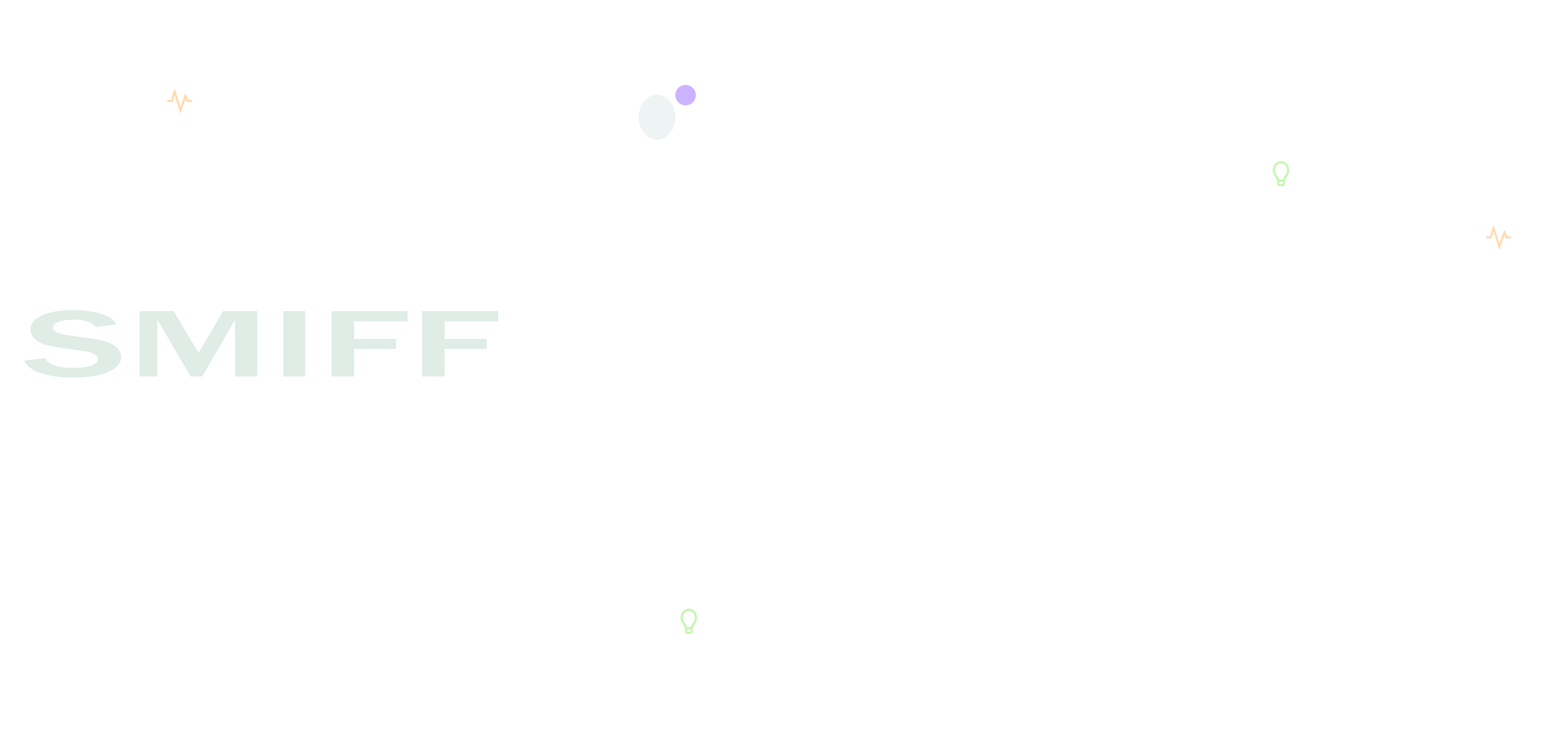
<style>
.page{position:relative;width:1568px;height:735px;background:#ffffff}
.page>*{position:absolute;margin:0}
.t1{font:98px "FranklinGothic-Medium";color:#e0ece6;scale:1.83 1}
</style>
<div class="page">
<p class="t1" style="left:24px;top:310px;width:474px;height:68px">SMIFF</p>
</div>
